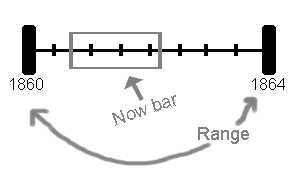
<style>
.page{position:relative;width:300px;height:180px;background:#ffffff}
.page>*{position:absolute;margin:0}
.t1{font:16px "ArialMT";color:#000000}
.t2{font:18px "ArialMT";color:#818181}
</style>
<div class="page">
<p class="t1" style="left:10px;top:78px;width:33px;height:12px">1860</p>
<p class="t1" style="left:252px;top:78px;width:33px;height:12px">1864</p>
<p class="t2" style="left:112px;top:95px;width:64px;height:31px;rotate:-19deg">Now bar</p>
<p class="t2" style="left:198px;top:127px;width:51px;height:17px">Range</p>
</div>
